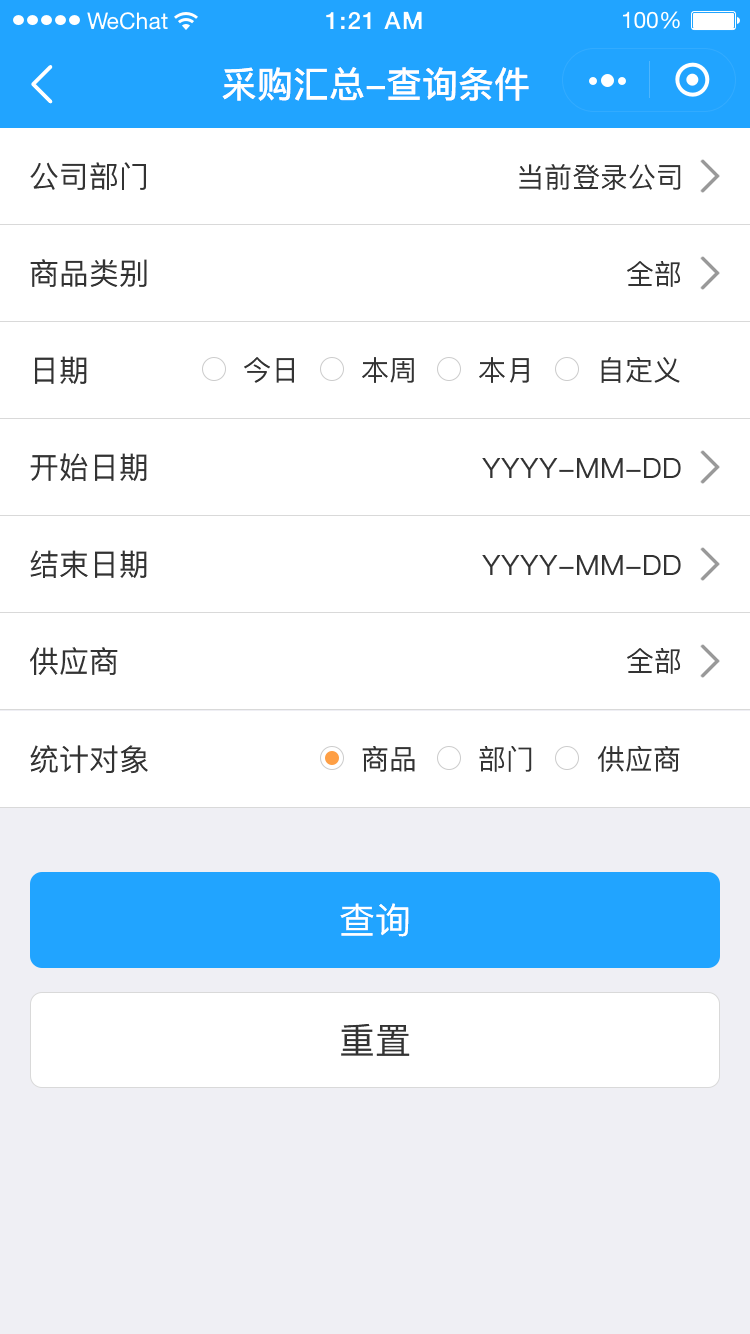
<style>
.page{position:relative;width:750px;height:1334px;background:#ffffff}
.page>*{position:absolute;margin:0}
.t1{font:36px "PingFang-SC-Bold";color:#ffffff}
.t2{font:30px "PingFang-SC-Medium";color:#333333}
.t3{font:28px "PingFang-SC-Medium";color:#333333}
.t4{font:36px "PingFang-SC-Medium";color:#ffffff}
.t5{font:36px "PingFang-SC-Medium";color:#333333}
</style>
<div class="page">
<p class="t1" style="left:222px;top:67px;width:307px;height:34px">采购汇总-查询条件</p>
<p class="t2" style="left:30px;top:162px;width:116px;height:28px">公司部门</p>
<p class="t3" style="left:519px;top:164px;width:162px;height:26px">当前登录公司</p>
<p class="t2" style="left:30px;top:259px;width:117px;height:28px">商品类别</p>
<p class="t3" style="left:627px;top:261px;width:54px;height:26px">全部</p>
<p class="t2" style="left:35px;top:356px;width:52px;height:28px">日期</p>
<p class="t3" style="left:244px;top:357px;width:50px;height:26px">今日</p>
<p class="t3" style="left:362px;top:357px;width:52px;height:26px">本周</p>
<p class="t3" style="left:479px;top:357px;width:50px;height:26px">本月</p>
<p class="t3" style="left:601px;top:357px;width:79px;height:26px">自定义</p>
<p class="t2" style="left:30px;top:453px;width:117px;height:28px">开始日期</p>
<p class="t3" style="left:482px;top:458px;width:199px;height:20px">YYYY-MM-DD</p>
<p class="t2" style="left:30px;top:550px;width:117px;height:28px">结束日期</p>
<p class="t3" style="left:482px;top:555px;width:199px;height:20px">YYYY-MM-DD</p>
<p class="t2" style="left:30px;top:647px;width:88px;height:28px">供应商</p>
<p class="t3" style="left:627px;top:648px;width:54px;height:26px">全部</p>
<p class="t2" style="left:30px;top:745px;width:118px;height:29px">统计对象</p>
<p class="t3" style="left:362px;top:746px;width:53px;height:26px">商品</p>
<p class="t3" style="left:479px;top:746px;width:53px;height:26px">部门</p>
<p class="t3" style="left:597px;top:746px;width:83px;height:26px">供应商</p>
<p class="t4" style="left:340px;top:903px;width:69px;height:34px">查询</p>
<p class="t5" style="left:341px;top:1023px;width:69px;height:33px">重置</p>
</div>
